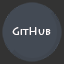
<style>
.page{position:relative;width:64px;height:64px;background:#434a54}
.page>*{position:absolute;margin:0}
.t1{font:10px "LithosPro-Regular";color:#fefafa}
</style>
<div class="page">
<p class="t1" style="left:12px;top:27px;width:39px;height:8px">GitHub</p>
</div>
